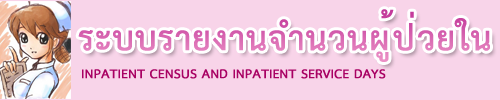
<style>
.page{position:relative;width:500px;height:100px;background:#f8d4e9}
.page>*{position:absolute;margin:0}
.t1{font:48px "THSarabunPSK-Bold";color:#da6bb3;font-weight:bold}
.t2{font:18px "THSarabunPSK-Bold";color:#a80163;font-weight:bold}
</style>
<div class="page">
<p class="t1" style="left:78px;top:9px;width:412px;height:53px">ระบบรายงานจำนวนผู้ป่วยใน</p>
<p class="t2" style="left:82px;top:69px;width:304px;height:10px">INPATIENT CENSUS AND INPATIENT SERVICE DAYS</p>
</div>
